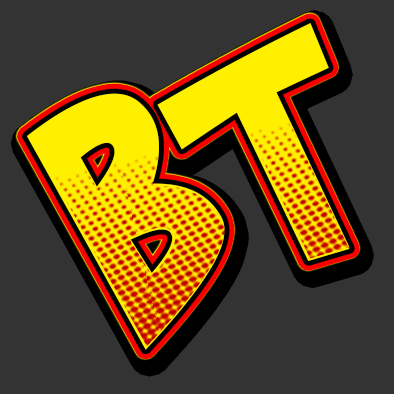
<style>
.page{position:relative;width:394px;height:394px;background:#333333}
.page>*{position:absolute;margin:0}
.t1{font:300px "BradyBunchRemastered";letter-spacing:-0.02em}
</style>
<div class="page">
<p class="t1" style="left:26px;top:23px;width:324px;height:327px">BT</p>
</div>
